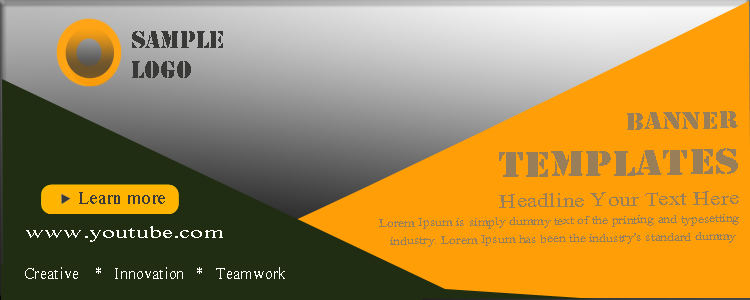
<style>
.page{position:relative;width:750px;height:300px;background:#ff9e06}
.page>*{position:absolute;margin:0}
.t1{font:25.4px "Stencil";color:#393938}
.t2{font:14.8px "Aparajita";color:#987f59;scale:1.15 1}
.t3{font:25.4px "Stencil";color:#987f59;scale:1.15 1}
.t4{font:38.1px "Stencil";color:#987f59;scale:1.15 1}
.t5{font:25.4px "Aparajita";color:#987f59;scale:1.15 1}
.t6{font:23.4px "Aparajita";color:#393938}
.t7{font:20.6px "Aparajita";color:#fffffa;scale:1.56 1}
.t8{font:20.2px "Aparajita";color:#fffffa}
</style>
<div class="page">
<p class="t1" style="left:132px;top:31px;width:91px;height:47px">Sample<br>logo</p>
<p class="t2" style="left:379px;top:111px;width:360px;height:136px;text-align:right;rotate:-1deg"><span class="t3">BANNER<br></span><span class="t4">TEMPLATES<br></span><span class="t5">Headline Your Text Here<br></span>         Lorem Ipsum is simply dummy text of the printing and typesetting<br> industry. Lorem Ipsum has been the industry's standard dummy</p>
<p class="t6" style="left:79px;top:192px;width:86px;height:12px">Learn more</p>
<p class="t7" style="left:26px;top:226px;width:197px;height:16px">www.youtube.com</p>
<p class="t8" style="left:25px;top:267px;width:260px;height:12px">Creative    *   Innovation   *   Teamwork</p>
</div>
